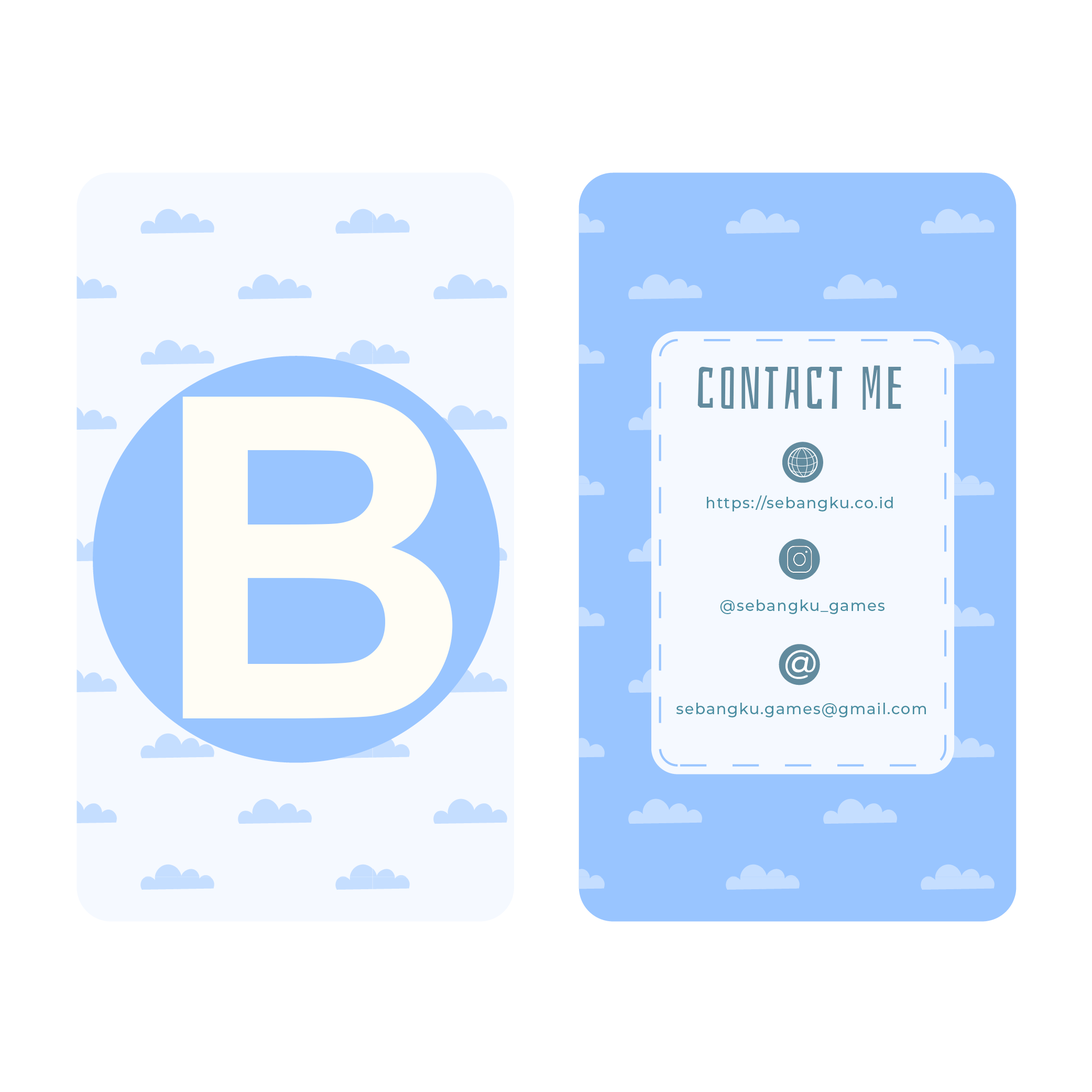
<style>
.page{position:relative;width:1092px;height:1092px;background:#ffffff}
.page>*{position:absolute;margin:0}
.t1{font:58.9px "Bahiana-Regular";letter-spacing:0.057em;color:#628b9e}
.t2{font:449.8px "Arial-BoldMT";letter-spacing:0.057em;color:#fffdf5}
.t3{font:15.3px "Montserrat-Medium";letter-spacing:0.057em;color:#468ca0}
</style>
<div class="page">
<p class="t1" style="left:697px;top:365px;width:204px;height:45px">contact me</p>
<p class="t2" style="left:182px;top:397px;width:271px;height:321px">B</p>
<p class="t3" style="left:707px;top:495px;width:186px;height:16px">https://sebangku.co.id</p>
<p class="t3" style="left:720px;top:599px;width:164px;height:15px">@sebangku_games</p>
<p class="t3" style="left:676px;top:703px;width:250px;height:14px">sebangku.games@gmail.com</p>
</div>
